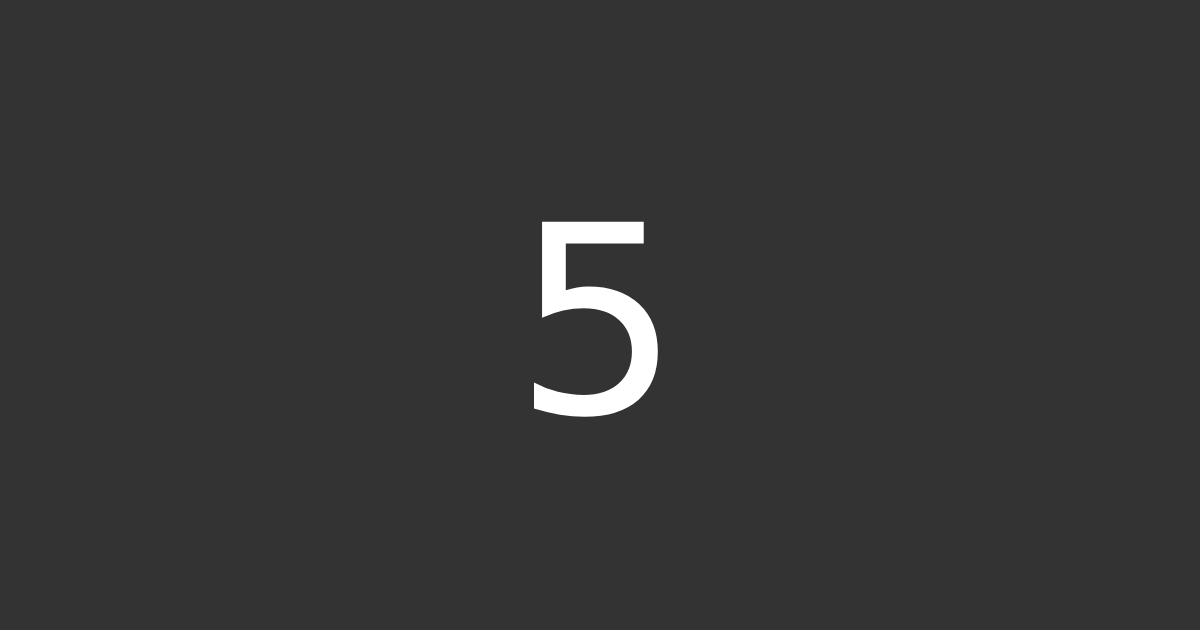
<style>
.page{position:relative;width:1200px;height:630px;background:#333333}
.page>*{position:absolute;margin:0}
.t1{font:262.5px "DejaVuSans";color:#ffffff}
</style>
<div class="page">
<p class="t1" style="left:534px;top:221px;width:124px;height:196px">5</p>
</div>
